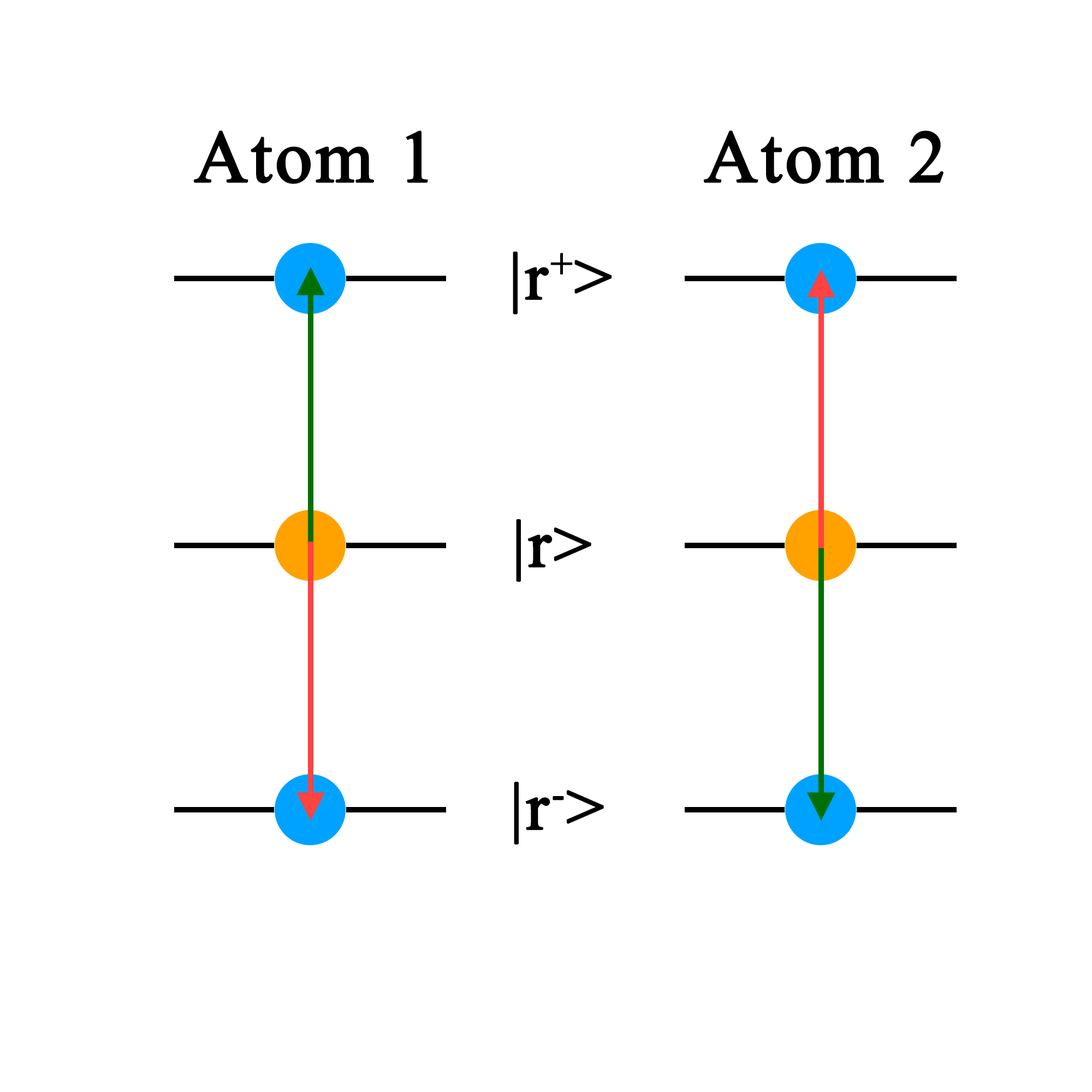
<style>
.page{position:relative;width:1092px;height:1092px;background:#ffffff}
.page>*{position:absolute;margin:0}
.t1{font:74px "TimesNewRomanPSMT";letter-spacing:0.02em;color:#000000;font-weight:bold}
.t2{font:66.8px "TimesNewRomanPSMT";letter-spacing:0.02em;color:#000000;font-weight:bold}
</style>
<div class="page">
<p class="t1" style="left:194px;top:130px;width:234px;height:54px">Atom 1</p>
<p class="t1" style="left:704px;top:130px;width:240px;height:54px">Atom 2</p>
<p class="t2" style="left:513px;top:251px;width:99px;height:63px">|r+&gt;</p>
<p class="t2" style="left:516px;top:519px;width:75px;height:63px">|r&gt;</p>
<p class="t2" style="left:514px;top:781px;width:90px;height:64px">|r-&gt;</p>
</div>
